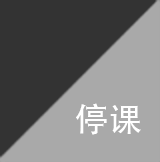
<style>
.page{position:relative;width:160px;height:162px;background:#333333}
.page>*{position:absolute;margin:0}
.t1{font:33.4px "STHeiti";color:#ffffff}
</style>
<div class="page">
<p class="t1" style="left:76px;top:103px;width:65px;height:32px">停课</p>
</div>
